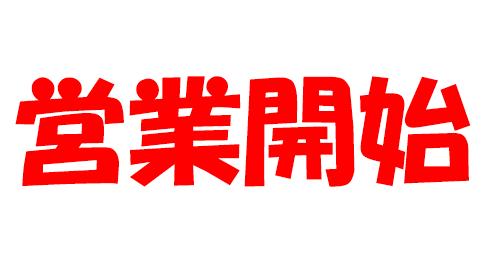
<style>
.page{position:relative;width:480px;height:272px;background:#ffffff}
.page>*{position:absolute;margin:0}
.t1{font:114.9px "HGSSoeiKakupoptai";color:#ff0000}
</style>
<div class="page">
<p class="t1" style="left:15px;top:76px;width:456px;height:111px">営業開始</p>
</div>
